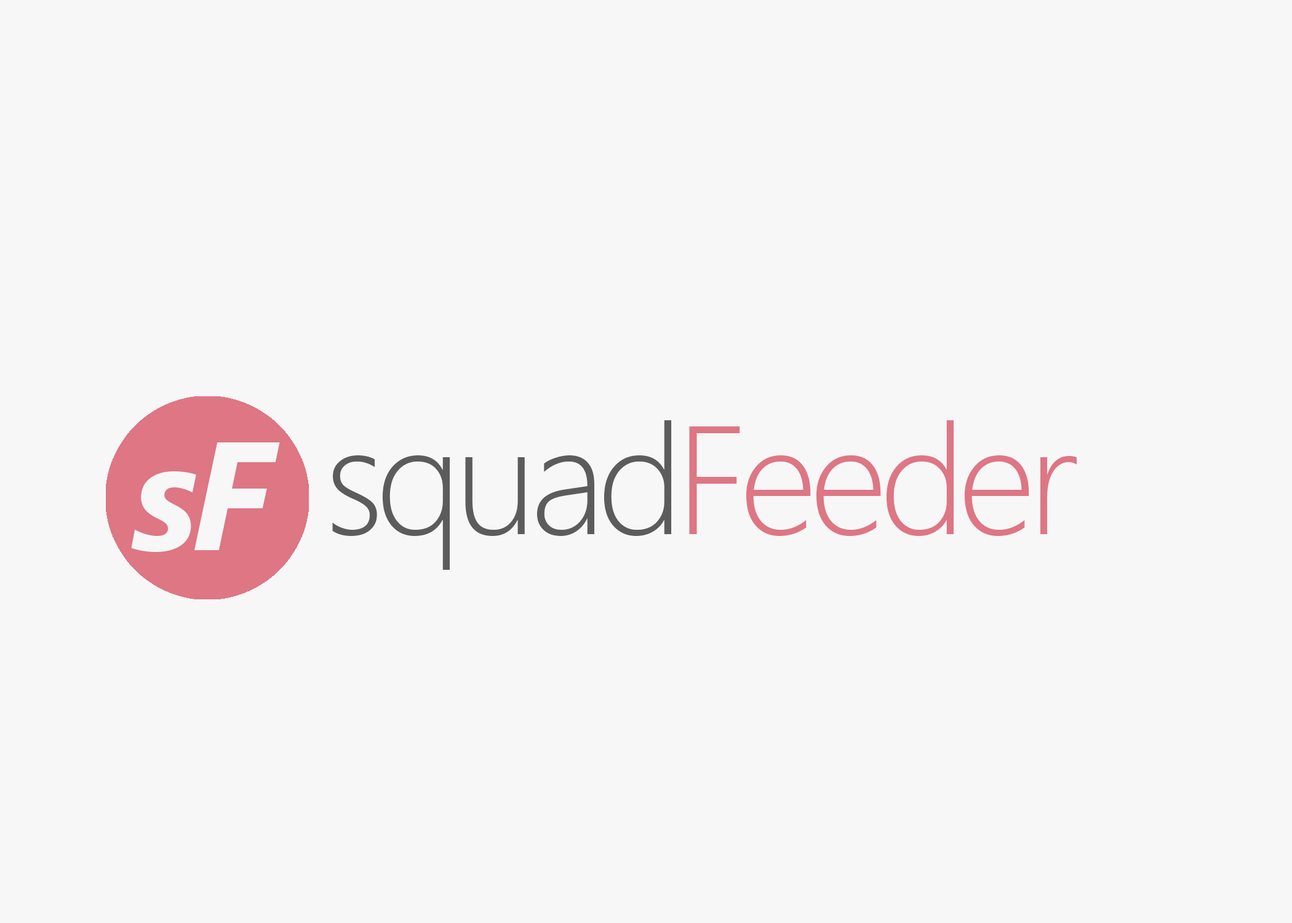
<style>
.page{position:relative;width:1292px;height:923px;background:#f7f7f7}
.page>*{position:absolute;margin:0}
.t1{font:153.8px "SegoeUI-Light";letter-spacing:-0.05em;color:#de7684}
.t2{font:153.8px "SegoeUI-Light";letter-spacing:-0.05em;color:#5c5c5c}
</style>
<div class="page">
<p class="t1" style="left:332px;top:420px;width:745px;height:150px"><span class="t2">squad</span>Feeder</p>
</div>
